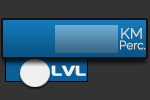
<style>
.page{position:relative;width:150px;height:100px;background:#333333}
.page>*{position:absolute;margin:0}
.t1{font:14.8px "Raleway";color:#d8d8d8}
.t2{font:12px "Raleway";color:#d8d8d8;scale:0.97 1}
.t3{font:27.6px "Xscale";color:#efefef;scale:0.75 1}
</style>
<div class="page">
<p class="t1" style="left:121px;top:28px;width:21px;height:11px">KM</p>
<p class="t2" style="left:120px;top:40px;width:26px;height:10px">Perc.</p>
<p class="t3" style="left:51px;top:65px;width:35px;height:11px">lvl</p>
</div>
